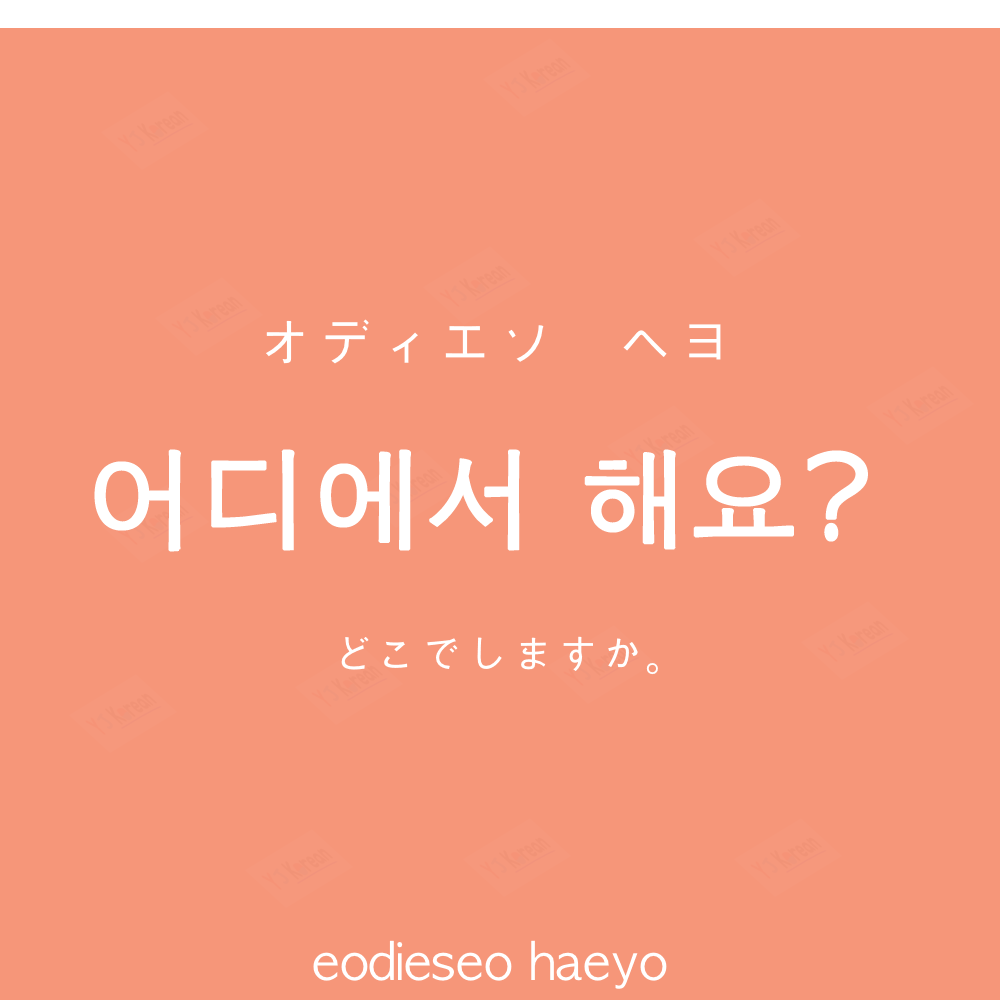
<style>
.page{position:relative;width:1000px;height:1000px;background:#f69679}
.page>*{position:absolute;margin:0}
.t1{font:60px "AppleGothic";color:#ffffff}
.t2{font:110px "AppleGothic";color:#ffffff;font-weight:bold}
.t3{font:45px "AppleGothic";color:#ffffff}
.t4{font:50px "AppleGothic";color:#ffffff}
</style>
<div class="page">
<p class="t1" style="left:266px;top:319px;width:455px;height:45px">オディエソ　ヘヨ</p>
<p class="t2" style="left:94px;top:449px;width:774px;height:103px">어디에서 해요?</p>
<p class="t3" style="left:341px;top:636px;width:317px;height:39px">どこでしますか。</p>
<p class="t4" style="left:313px;top:940px;width:354px;height:49px">eodieseo haeyo</p>
</div>
